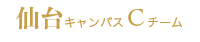
<style>
.page{position:relative;width:200px;height:42px;background:#ffffff}
.page>*{position:absolute;margin:0}
.t1{font:12px "HiraKakuPro-W3";color:#c99f44}
.t2{font:24px "ToppanBunkyuMidashiMinchoStdN-ExtraBold";color:#c99f44}
.t3{font:24px "YuMin-Medium";color:#c99f44}
</style>
<div class="page">
<p class="t1" style="left:16px;top:6px;width:167px;height:24px"><span class="t2">仙台</span>キャンパス<span class="t3">C</span>チーム</p>
</div>
